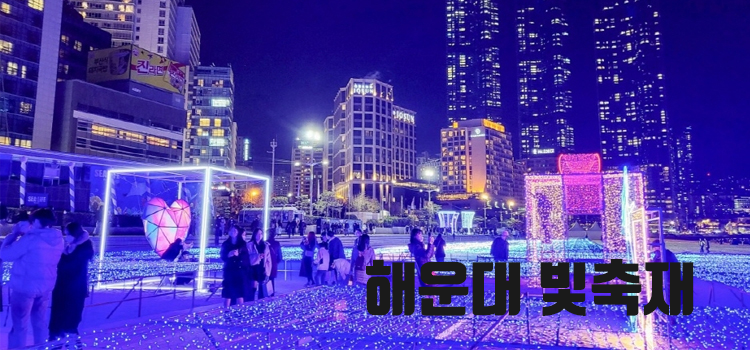
<style>
.page{position:relative;width:750px;height:350px}
.page>*{position:absolute;margin:0}
.t1{font:58.3px "TmonMonsoriBlack";color:#1a1a1a}
</style>
<div class="page">
<p class="t1" style="left:366px;top:259px;width:328px;height:57px">해운대 빛축재</p>
</div>
